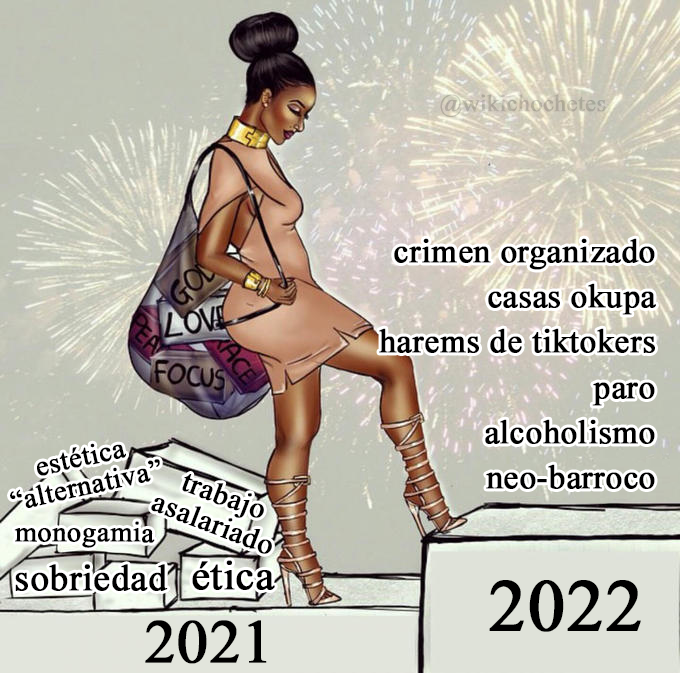
<style>
.page{position:relative;width:680px;height:673px}
.page>*{position:absolute;margin:0}
.t1{font:23.8px "TimesNewRomanPSMT";color:#b2ac9f;font-weight:bold}
.t2{font:33.2px "TimesNewRomanPSMT";color:#000000;font-weight:bold}
.t3{font:28.4px "TimesNewRomanPSMT";color:#000000;font-weight:bold}
.t4{font:29.7px "TimesNewRomanPSMT";color:#000000;font-weight:bold}
.t5{font:28.2px "TimesNewRomanPSMT";color:#000000;font-weight:bold}
.t6{font:36.9px "TimesNewRomanPSMT";color:#000000;font-weight:bold}
.t7{font:41px "TimesNewRomanPSMT";color:#000000;font-weight:bold}
.t8{font:74px "TimesNewRomanPSMT";color:#000000;font-weight:bold}
.t9{font:61.7px "TimesNewRomanPSMT";color:#000000;font-weight:bold}
</style>
<div class="page">
<p class="t1" style="left:440px;top:94px;width:166px;height:23px">@wikichochetes</p>
<p class="t2" style="left:379px;top:238px;width:277px;height:251px;text-align:right">crimen organizado<br>casas okupa<br>harems de tiktokers<br>paro<br>alcoholismo<br>neo-barroco</p>
<p class="t3" style="left:10px;top:443px;width:150px;height:65px;text-align:center;rotate:-12deg">estética<br>“alternativa”</p>
<p class="t4" style="left:151px;top:474px;width:121px;height:80px;text-align:center;rotate:21deg">trabajo<br>asalariado</p>
<p class="t5" style="left:14px;top:521px;width:141px;height:27px">monogamia</p>
<p class="t6" style="left:15px;top:564px;width:153px;height:27px">sobriedad</p>
<p class="t7" style="left:192px;top:560px;width:83px;height:30px">ética</p>
<p class="t8" style="left:489px;top:580px;width:152px;height:52px">2022</p>
<p class="t9" style="left:145px;top:620px;width:122px;height:44px">2021</p>
</div>
